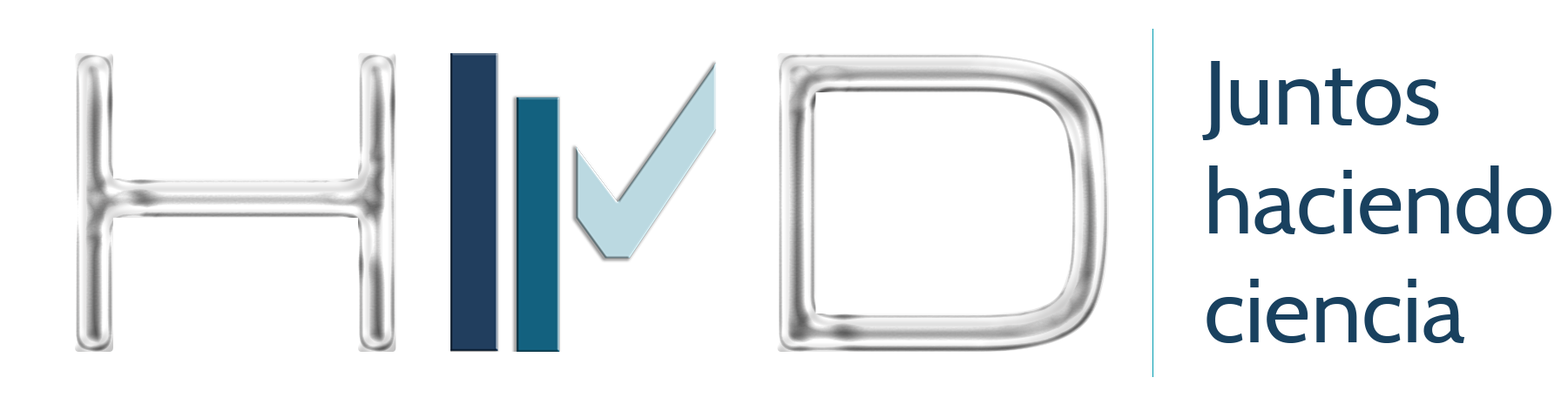
<style>
.page{position:relative;width:1568px;height:418px;background:#ffffff}
.page>*{position:absolute;margin:0}
.t1{font:90.7px "Cabin-Regular";color:#19415f}
</style>
<div class="page">
<p class="t1" style="left:1202px;top:61px;width:349px;height:282px">Juntos<br>haciendo<br>ciencia</p>
</div>
